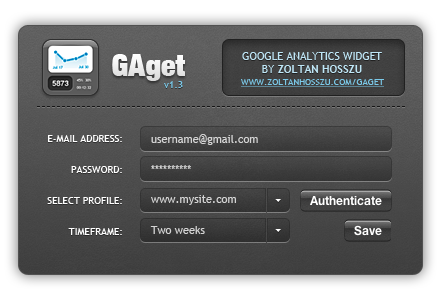
<style>
.page{position:relative;width:440px;height:300px}
.page>*{position:absolute;margin:0}
.t1{font:30px "HelveticaNeueLT-ExtBlackCond";color:#ffffff}
.t2{font:11px/13px "TrebuchetMS";color:#bfe6f6;text-transform:uppercase}
.t3{font:11px/13px "TrebuchetMS-Bold";color:#bfe6f6;text-transform:uppercase}
.t4{font:10px "TrebuchetMS";color:#7bcaea}
.t5{font:9px "TrebuchetMS";color:#7bcaea;text-transform:uppercase;text-decoration:underline}
.t6{font:10px/31px "TrebuchetMS";color:#ffffff;text-transform:uppercase}
.t7{font:11px/30px "TrebuchetMS";color:#d4d4d4}
.t8{font:11px/31px "TrebuchetMS";color:#d4d4d4}
</style>
<div class="page">
<p class="t1" style="left:112px;top:54px;width:73px;height:27px">GAget</p>
<p class="t2" style="left:242px;top:52px;width:140px;height:21px;text-align:center">Google Analytics Widget<br>by <span class="t3">Zoltan Hosszu</span></p>
<p class="t4" style="left:164px;top:81px;width:19px;height:7px">v1.3</p>
<p class="t5" style="left:241px;top:79px;width:143px;height:8px">www.zoltanhosszu.com/gaget</p>
<p class="t6" style="left:47px;top:135px;width:75px;height:100px;text-align:right">E-mail address:<br>Password:<br>Select profile:<br>timeframe:</p>
<p class="t7" style="left:150px;top:134px;width:108px;height:100px">username@gmail.com<br>**********<br>www.mysite.com<br><span class="t8">Two weeks</span></p>
</div>
